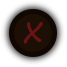
<style>
.page{position:relative;width:67px;height:67px;background:#ffffff}
.page>*{position:absolute;margin:0}
.t1{font:36px "SegoePrint";color:#691313}
</style>
<div class="page">
<p class="t1" style="left:23px;top:22px;width:20px;height:22px">x</p>
</div>
